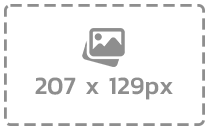
<style>
.page{position:relative;width:207px;height:129px;background:#ffffff}
.page>*{position:absolute;margin:0}
.t1{font:25px "Kanit-Medium";color:#8e8e8e}
</style>
<div class="page">
<p class="t1" style="left:35px;top:77px;width:138px;height:23px">207 x 129px</p>
</div>
